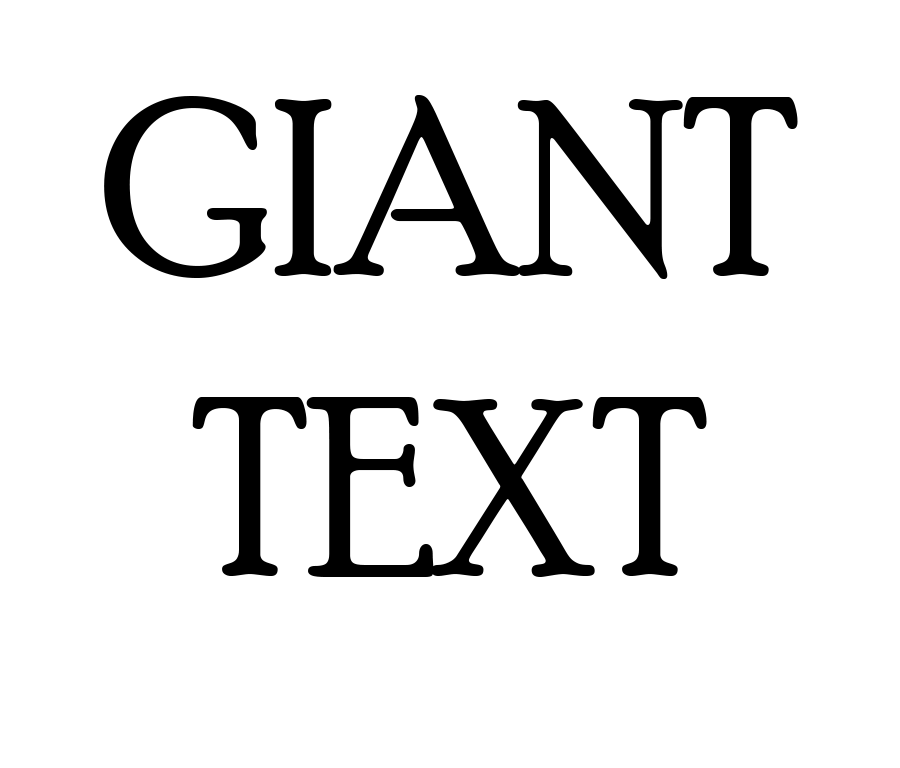
<style>
.page{position:relative;width:900px;height:768px;background:#ffffff}
.page>*{position:absolute;margin:0}
.t1{font:250px "PoorRichard-Regular";color:#000000}
</style>
<div class="page">
<p class="t1" style="left:104px;top:95px;width:694px;height:482px;text-align:center">GIANT<br>TEXT</p>
</div>
